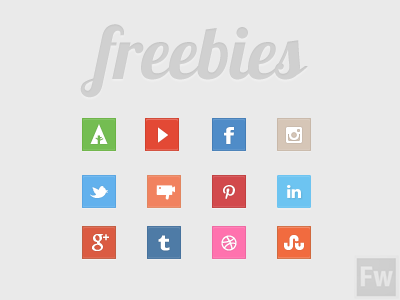
<style>
.page{position:relative;width:400px;height:300px;background:#eaeaea}
.page>*{position:absolute;margin:0}
.t1{font:73px "Lobster1.4";color:#d0d0d0}
</style>
<div class="page">
<p class="t1" style="left:80px;top:24px;width:228px;height:74px">freebies</p>
</div>
